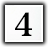
<style>
.page{position:relative;width:48px;height:48px}
.page>*{position:absolute;margin:0}
.t1{font:30px "FZTYSK--GBK1-0";color:#000000}
</style>
<div class="page">
<p class="t1" style="left:15px;top:12px;width:17px;height:24px">4</p>
</div>
